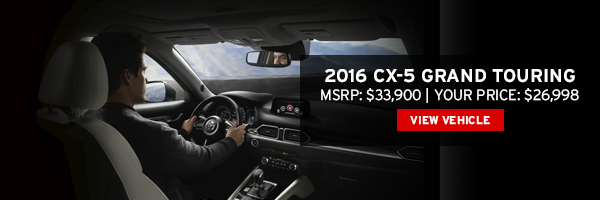
<style>
.page{position:relative;width:600px;height:200px}
.page>*{position:absolute;margin:0}
.t1{font:18.4px "Interstate-Bold";color:#ffffff}
.t2{font:14.8px "Interstate-Light";color:#ffffff}
.t3{font:11.2px "Interstate-Bold";color:#ffffff}
</style>
<div class="page">
<p class="t1" style="left:325px;top:69px;width:250px;height:14px">2016 CX-5 GRAND TOURING</p>
<p class="t2" style="left:321px;top:88px;width:258px;height:15px">MSRP: $33,900 | YOUR PRICE: $26,998</p>
<p class="t3" style="left:410px;top:116px;width:80px;height:9px">VIEW VEHICLE</p>
</div>
